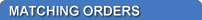
<style>
.page{position:relative;width:202px;height:20px;background:#4379c1}
.page>*{position:absolute;margin:0}
.t1{font:13.3px "Arial-BoldMT";color:#ffffff}
</style>
<div class="page">
<p class="t1" style="left:9px;top:5px;width:131px;height:11px">MATCHING ORDERS</p>
</div>
